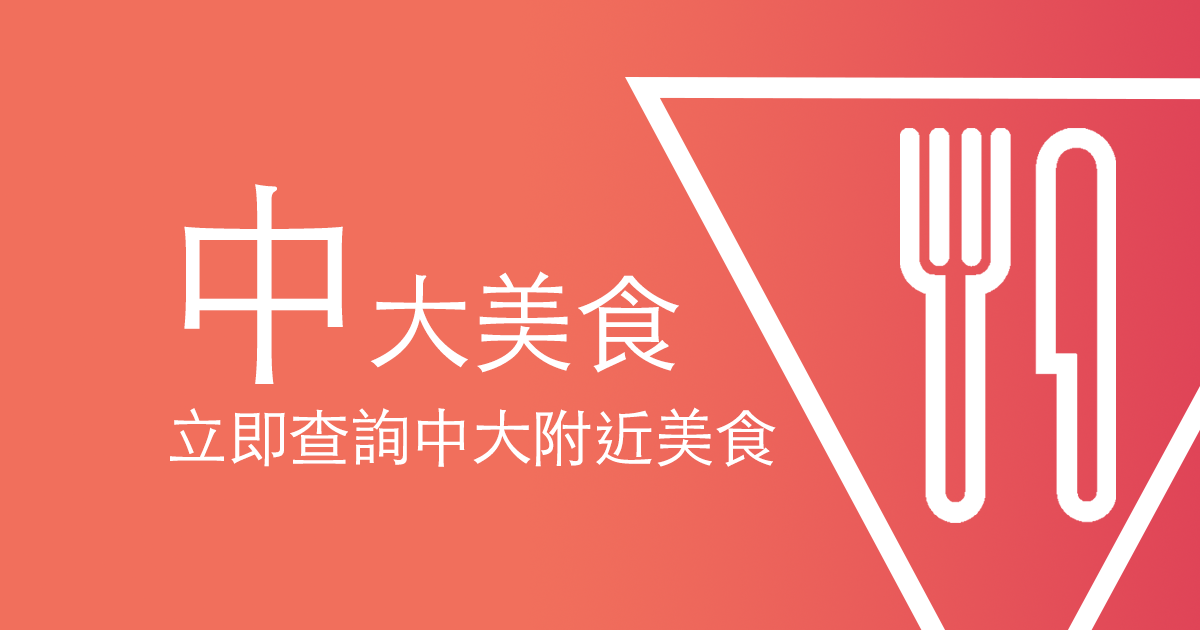
<style>
.page{position:relative;width:1200px;height:630px;background:#f16f5c}
.page>*{position:absolute;margin:0}
.t1{font:106.7px "STHeitiTC-Light";letter-spacing:-0.02em;color:#ffffff}
.t2{font:213.3px "STHeitiTC-Light";letter-spacing:-0.02em;color:#ffffff}
.t3{font:62.2px "STHeitiTC-Light";letter-spacing:-0.02em;color:#ffffff}
</style>
<div class="page">
<p class="t1" style="left:184px;top:184px;width:495px;height:200px"><span class="t2">中</span>大美食</p>
<p class="t3" style="left:170px;top:407px;width:606px;height:60px">立即查詢中大附近美食</p>
</div>
